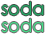
<style>
.page{position:relative;width:45px;height:35px;background:#ffffff}
.page>*{position:absolute;margin:0}
.t1{font:18px "STHeiti";color:#21a965}
.t2{font:18px "STHeiti";color:#43dd87}
</style>
<div class="page">
<p class="t1" style="left:1px;top:1px;width:43px;height:15px">soda</p>
<p class="t2" style="left:1px;top:18px;width:43px;height:15px">soda</p>
</div>
